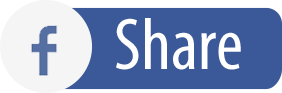
<style>
.page{position:relative;width:282px;height:93px;background:#3b5998}
.page>*{position:absolute;margin:0}
.t1{font:73.8px "MyriadPro-Cond";color:#ffffff}
</style>
<div class="page">
<p class="t1" style="left:116px;top:18px;width:125px;height:52px">Share</p>
</div>
